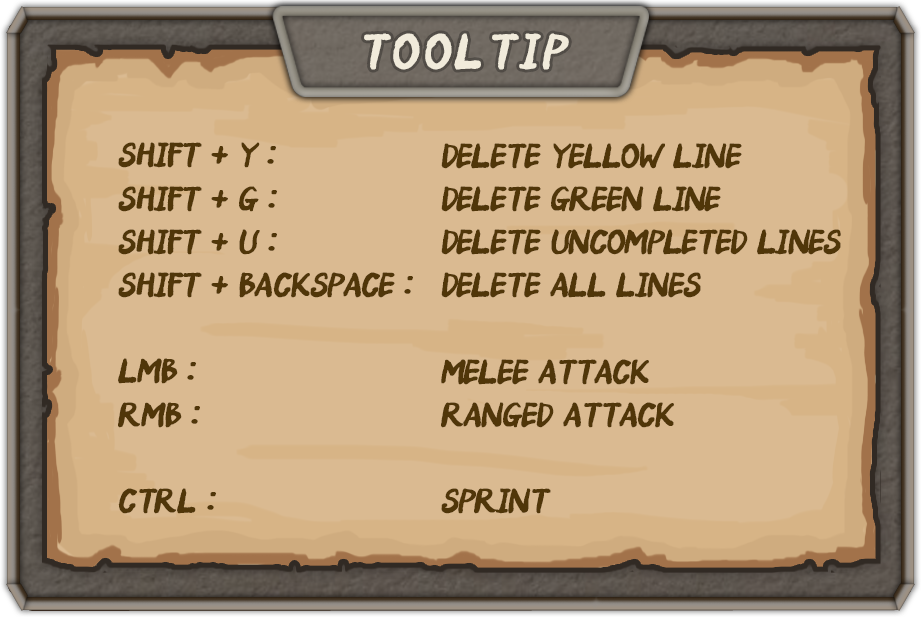
<style>
.page{position:relative;width:921px;height:617px;background:#daba91}
.page>*{position:absolute;margin:0}
.t1{font:52.1px "SangSangFlowerRoad";letter-spacing:0.075em;color:#f1ebdb;text-transform:uppercase;font-weight:bold;font-style:italic}
.t2{font:36px "SangSangFlowerRoad";letter-spacing:-0.025em;color:#503609;text-transform:uppercase;font-weight:bold;font-style:italic}
</style>
<div class="page">
<p class="t1" style="left:364px;top:33px;width:205px;height:37px">Tooltip</p>
<p class="t2" style="left:118px;top:142px;width:295px;height:372px">Shift + Y : <br>SHIFT + G : <br>Shift + U : <br>Shift + Backspace :<br><br>LMB :<br>RMB : <br><br>CTRL :</p>
<p class="t2" style="left:441px;top:143px;width:400px;height:371px">Delete Yellow line<br>Delete Green Line<br>delete uncompleted lines<br>delete all Lines<br><br>Melee attack<br>Ranged attack<br><br>SPRINT</p>
</div>
